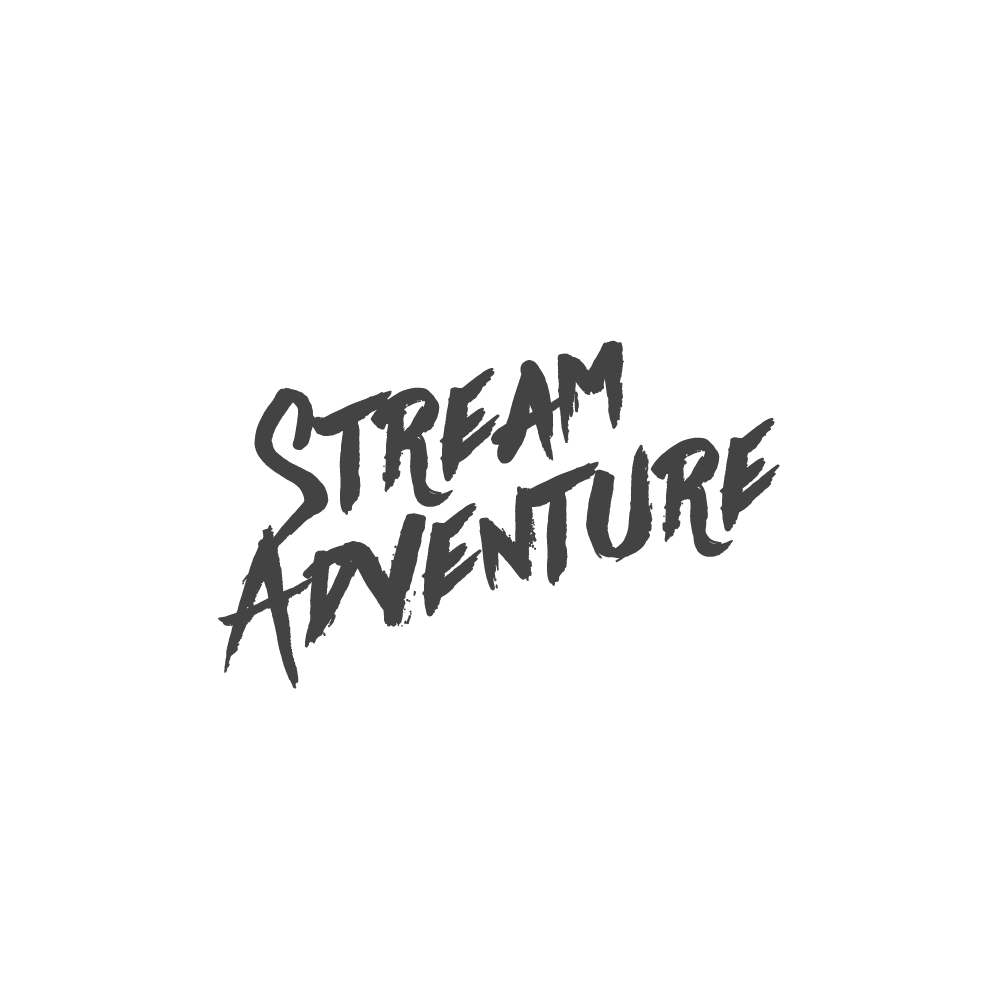
<style>
.page{position:relative;width:1000px;height:1000px;background:#ffffff}
.page>*{position:absolute;margin:0}
.t1{font:162.8px "Againts";color:#444343;font-weight:bold}
</style>
<div class="page">
<p class="t1" style="left:242px;top:340px;width:382px;height:245px;rotate:-16deg">Stream</p>
<p class="t1" style="left:218px;top:418px;width:562px;height:271px;rotate:-16deg">Adventure</p>
</div>
